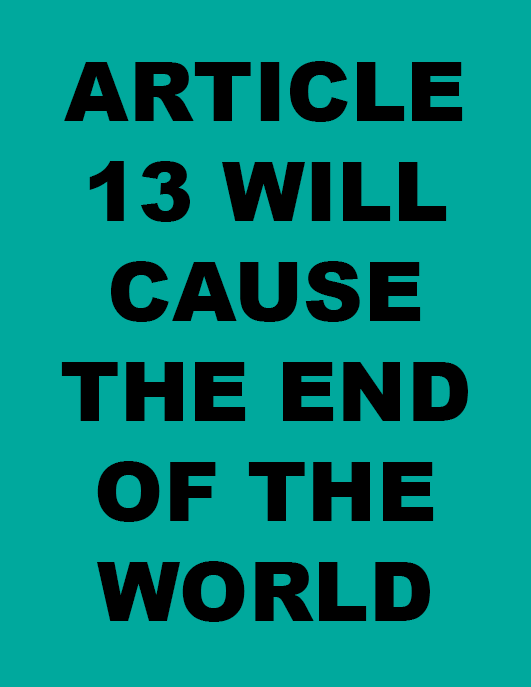
<style>
.page{position:relative;width:531px;height:687px;background:#00a99d}
.page>*{position:absolute;margin:0}
.t1{font:83.3px "Arial-Black";color:#000000}
</style>
<div class="page">
<p class="t1" style="left:61px;top:61px;width:407px;height:561px;text-align:center">ARTICLE 13 WILL CAUSE THE END OF THE WORLD</p>
</div>
